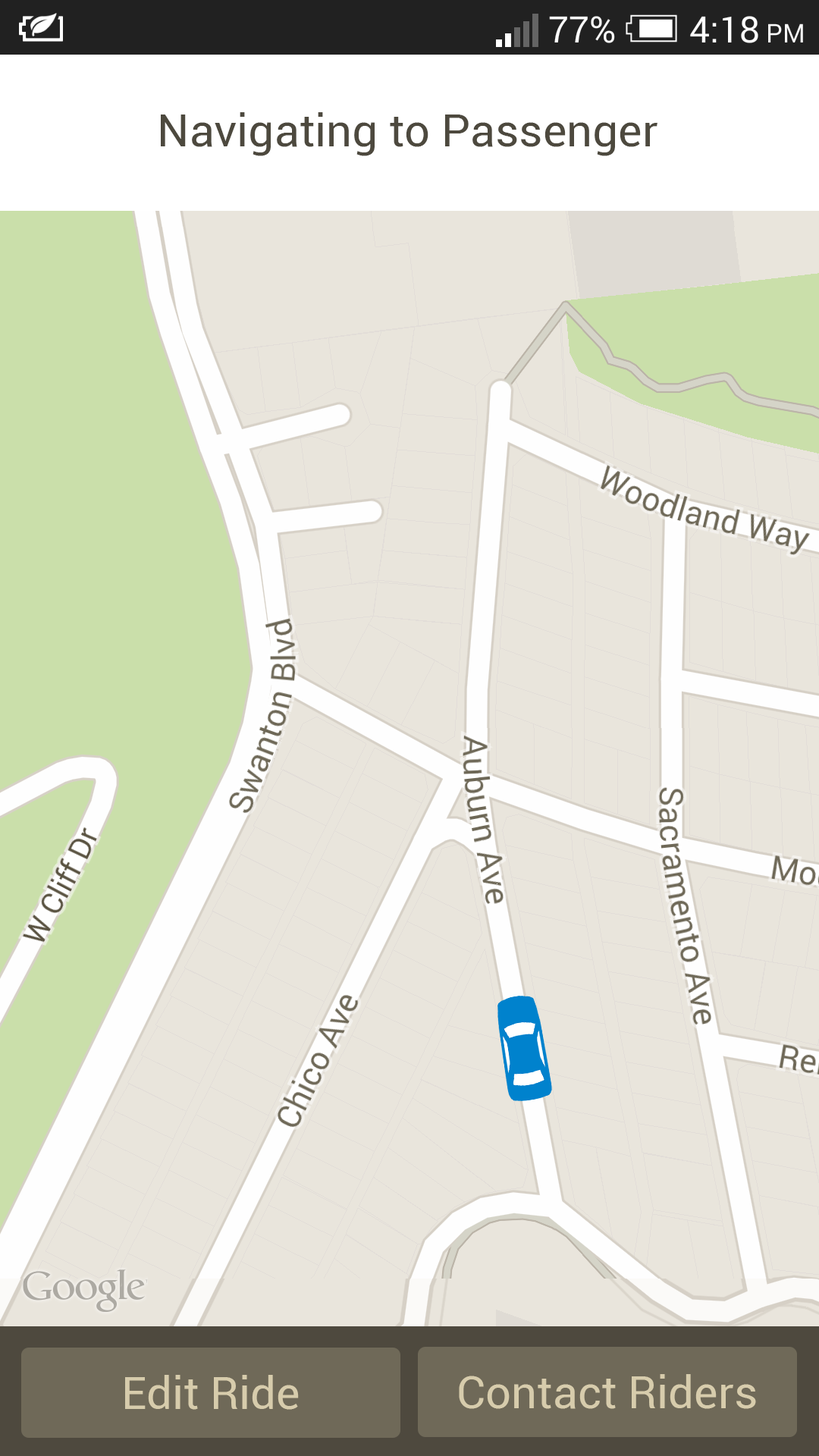
<style>
.page{position:relative;width:819px;height:1456px;background:#e9e5dc}
.page>*{position:absolute;margin:0}
.t1{font:45.5px "Roboto-Regular";color:#4d493e}
.t2{font:45.5px "Roboto-Regular";color:#d7ccac}
</style>
<div class="page">
<p class="t1" style="left:161px;top:112px;width:496px;height:44px">Navigating to Passenger</p>
<p class="t2" style="left:125px;top:1375px;width:174px;height:35px">Edit Ride</p>
<p class="t2" style="left:459px;top:1374px;width:297px;height:35px">Contact Riders</p>
</div>
